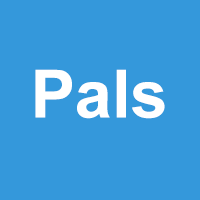
<style>
.page{position:relative;width:200px;height:200px;background:#3498db}
.page>*{position:absolute;margin:0}
.t1{font:66.7px "Arial-BoldMT";color:#ffffff}
</style>
<div class="page">
<p class="t1" style="left:35px;top:69px;width:130px;height:50px">Pals</p>
</div>
